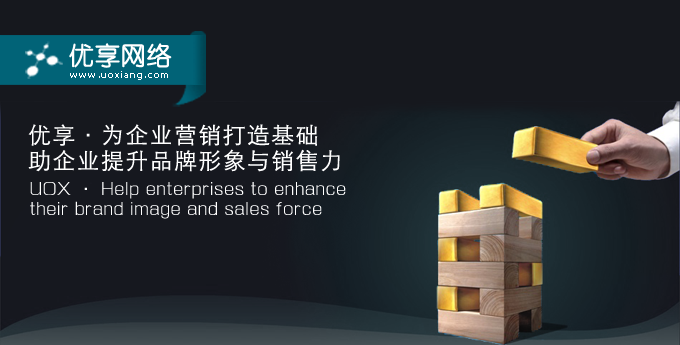
<style>
.page{position:relative;width:680px;height:345px;background:#16181e}
.page>*{position:absolute;margin:0}
.t1{font:25.1px "YouYuan";color:#ffffff;font-weight:bold}
.t2{font:10.5px "Tahoma";letter-spacing:0.068em;color:#ffffff}
.t3{font:22.8px/25.6px "STXihei";letter-spacing:0.068em;color:#ffffff}
.t4{font:17.1px/19.9px "FZXQJW--GB1-0";letter-spacing:0.068em;color:#ffffff}
</style>
<div class="page">
<p class="t1" style="left:69px;top:43px;width:103px;height:25px">优享网络</p>
<p class="t2" style="left:70px;top:71px;width:98px;height:9px">www.uoxiang.com</p>
<p class="t3" style="left:28px;top:124px;width:312px;height:48px">优享·为企业营销打造基础<br>助企业提升品牌形象与销售力</p>
<p class="t4" style="left:30px;top:182px;width:316px;height:37px">UOX · Help enterprises to enhance<br>their brand image and sales force</p>
</div>
